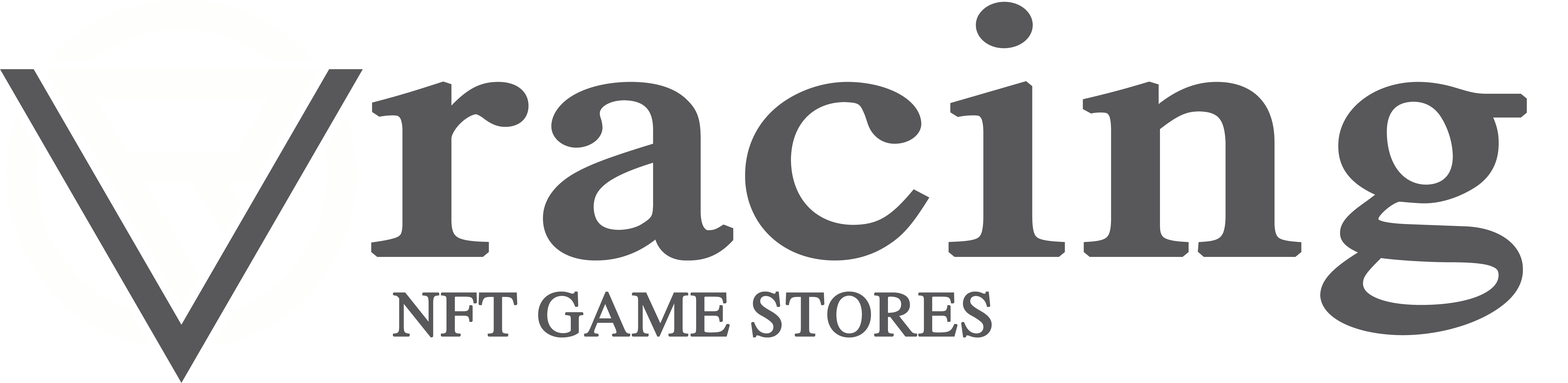
<style>
.page{position:relative;width:1568px;height:383px;background:#ffffff}
.page>*{position:absolute;margin:0}
.t1{font:359.7px "STIXGeneral-Regular";color:#58585a;font-weight:bold;scale:1.22 1}
.t2{font:64.1px "STIXGeneral-Regular";color:#58585a;font-weight:bold}
</style>
<div class="page">
<p class="t1" style="left:371px;top:2px;width:1156px;height:334px">racing</p>
<p class="t2" style="left:393px;top:292px;width:599px;height:46px">NFT GAME STORES</p>
</div>
